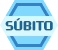
<style>
.page{position:relative;width:58px;height:50px;background:#ffffff}
.page>*{position:absolute;margin:0}
.t1{font:11.2px "AokaneStd-EB";letter-spacing:-0.03em;color:#1b6593;font-weight:bold;scale:1.09 1}
</style>
<div class="page">
<p class="t1" style="left:5px;top:18px;width:48px;height:13px">SÚBITO</p>
</div>
